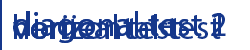
<style>
.page{position:relative;width:250px;height:50px;background:#ffffff}
.page>*{position:absolute;margin:0}
.t1{font:35px "MyriadPro-Regular";color:#15378b}
</style>
<div class="page">
<p class="t1" style="left:13px;top:11px;width:213px;height:32px">diagonal test 2</p>
<p class="t1" style="left:13px;top:14px;width:168px;height:25px">vertical test</p>
<p class="t1" style="left:14px;top:14px;width:80px;height:25px">home</p>
<p class="t1" style="left:14px;top:11px;width:207px;height:32px">diagonal test 1</p>
<p class="t1" style="left:14px;top:14px;width:207px;height:25px">horizontal test</p>
</div>
